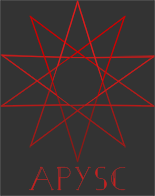
<style>
.page{position:relative;width:155px;height:196px;background:#333333}
.page>*{position:absolute;margin:0}
.t1{font:45.9px "Pauline-Regular";color:#c6201f}
</style>
<div class="page">
<p class="t1" style="left:29px;top:166px;width:97px;height:25px">apysc</p>
</div>
